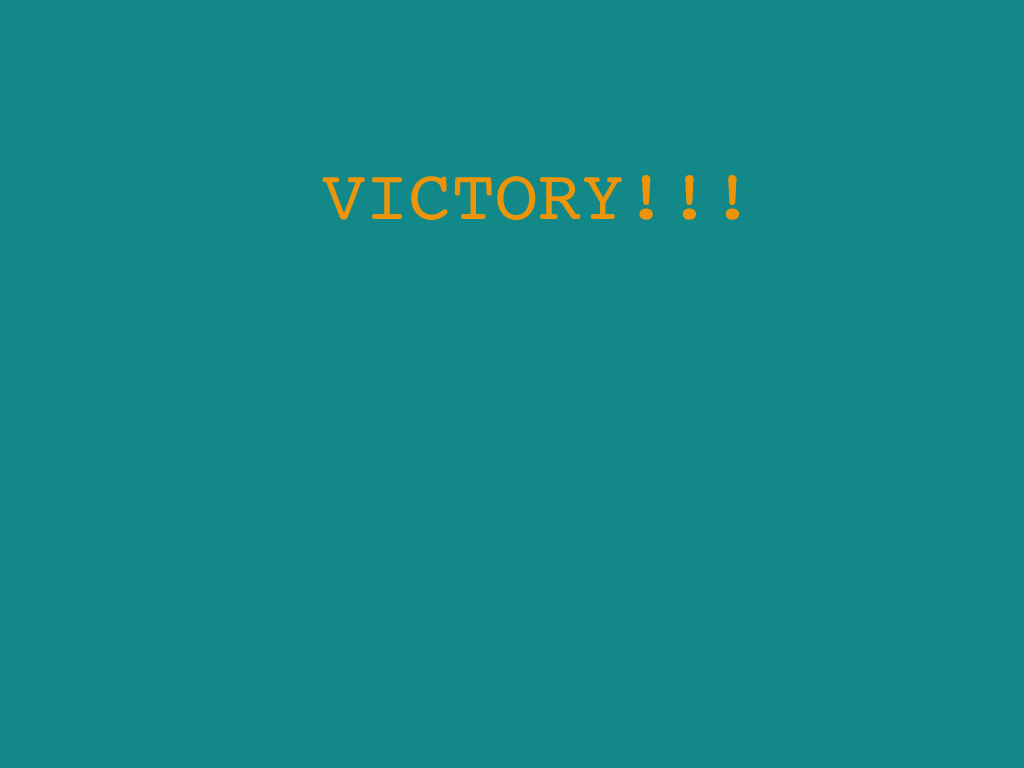
<style>
.page{position:relative;width:1024px;height:768px;background:#128888}
.page>*{position:absolute;margin:0}
.t1{font:72px "Courier";color:#ec950b}
</style>
<div class="page">
<p class="t1" style="left:322px;top:175px;width:417px;height:45px">VICTORY!!!</p>
</div>
